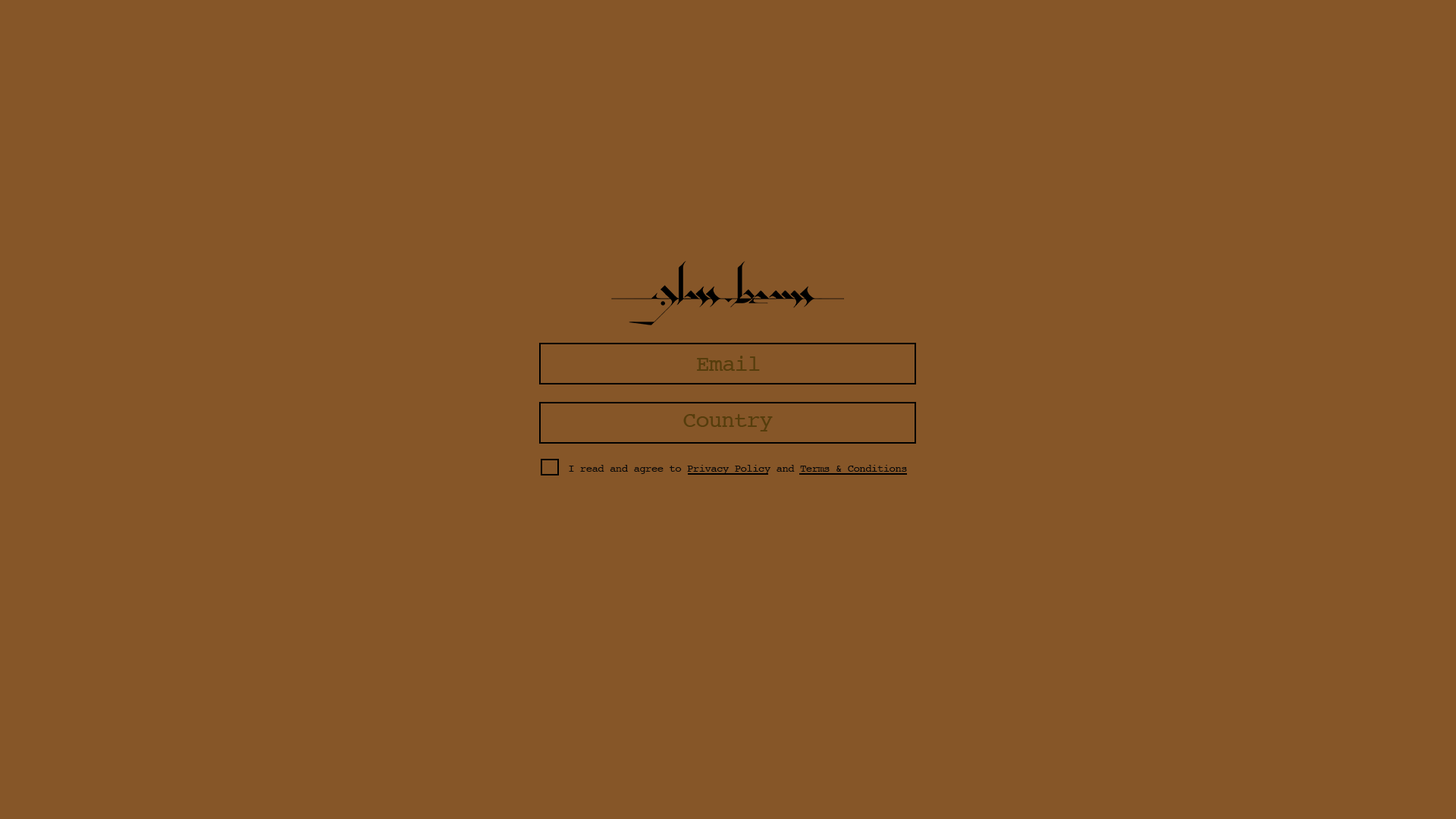
<style>
.page{position:relative;width:1456px;height:819px;background:#865628}
.page>*{position:absolute;margin:0}
.t1{font:22.7px "Courier";letter-spacing:-0.04em;color:#563d0c}
.t2{font:10.6px "Courier";letter-spacing:-0.04em;color:#0b0a09}
</style>
<div class="page">
<p class="t1" style="left:697px;top:356px;width:63px;height:15px">Email</p>
<p class="t1" style="left:683px;top:414px;width:90px;height:17px">Country</p>
<p class="t2" style="left:569px;top:465px;width:338px;height:9px">I read and agree to Privacy Policy and Terms &amp; Conditions</p>
</div>
